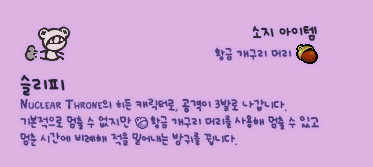
<style>
.page{position:relative;width:373px;height:167px;background:#ddb3e2}
.page>*{position:absolute;margin:0}
.t1{font:12px "UhBeeSe_hyunBold";color:#2b2636}
.t2{font:12px "UhBeeSe_hyunBold";letter-spacing:-0.1em;color:#2b2636}
.t3{font:10px "UhBeeSe_hyunBold";color:#4e3d7c}
.t4{font:10px/17px "UhBeeSe_hyunBold";letter-spacing:-0.025em;color:#4e3d7c}
.t5{font:16px/23px "UhBeeSe_hyunBold";color:#2b2636}
.t6{font:14px/17px "Font_soulsV2_Title-Regular";letter-spacing:-0.025em;color:#4e3d7c;font-variant:small-caps}
</style>
<div class="page">
<p class="t1" style="left:252px;top:26px;width:65px;height:15px"><span class="t2">소</span>지 아이템</p>
<p class="t3" style="left:214px;top:47px;width:78px;height:14px">황금 개구리 머리</p>
<p class="t4" style="left:20px;top:74px;width:300px;height:73px"><span class="t5">슬리피<br></span><span class="t6">Nuclear Throne</span>의 히든 캐릭터로, 공격이 3발로 나갑니다.<br>기본적으로 멈출 수 없지만     황금 개구리 머리를 사용해 멈출 수 있고<br>멈춘 시간에 비례해 적을 밀어내는 방귀를 뀝니다.</p>
</div>
